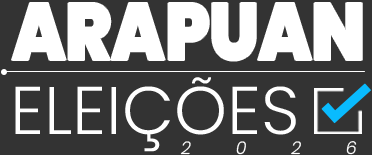
<style>
.page{position:relative;width:372px;height:155px;background:#333333}
.page>*{position:absolute;margin:0}
.t1{font:80.7px "Poppins-Black";letter-spacing:-0.01em;color:#ffffff;scale:0.86 1}
.t2{font:67.3px "Poppins-Light";color:#ffffff}
.t3{font:17.4px "Poppins-LightItalic";letter-spacing:2.56em;color:#ffffff}
</style>
<div class="page">
<p class="t1" style="left:12px;top:3px;width:350px;height:58px">ARAPUAN</p>
<p class="t2" style="left:15px;top:77px;width:281px;height:75px">ELEIÇÕES</p>
<p class="t3" style="left:180px;top:141px;width:177px;height:14px">2026</p>
</div>
